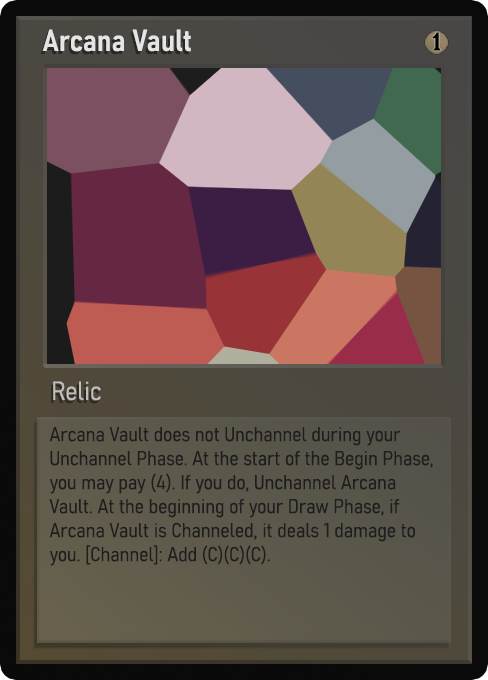
<style>
.page{position:relative;width:488px;height:680px}
.page>*{position:absolute;margin:0}
.t1{font:30px "Bahnschrift-SemiBoldSemiCondensed";color:#f2f2f2;font-weight:bold}
.t2{font:25px "WTRRoycroft";color:#000000;font-weight:bold;scale:1.09 1}
.t3{font:26px "Bahnschrift-LightSemiCondensed";color:#c8c8c8;font-weight:bold}
.t4{font:20px "Bahnschrift-LightSemiCondensed";color:#1e1e1e;font-weight:bold}
</style>
<div class="page">
<p class="t1" style="left:42px;top:29px;width:149px;height:23px;opacity:0.9">Arcana Vault</p>
<p class="t2" style="left:432px;top:32px;width:9px;height:19px">1</p>
<p class="t3" style="left:53px;top:381px;width:48px;height:20px;opacity:0.9">Relic</p>
<p class="t4" style="left:49px;top:427px;width:384px;height:139px">Arcana Vault does not Unchannel during your Unchannel Phase. At the start of the Begin Phase, you may pay (4). If you do, Unchannel Arcana Vault. At the beginning of your Draw Phase, if Arcana Vault is Channeled, it deals 1 damage to you. [Channel]: Add (C)(C)(C).</p>
</div>
